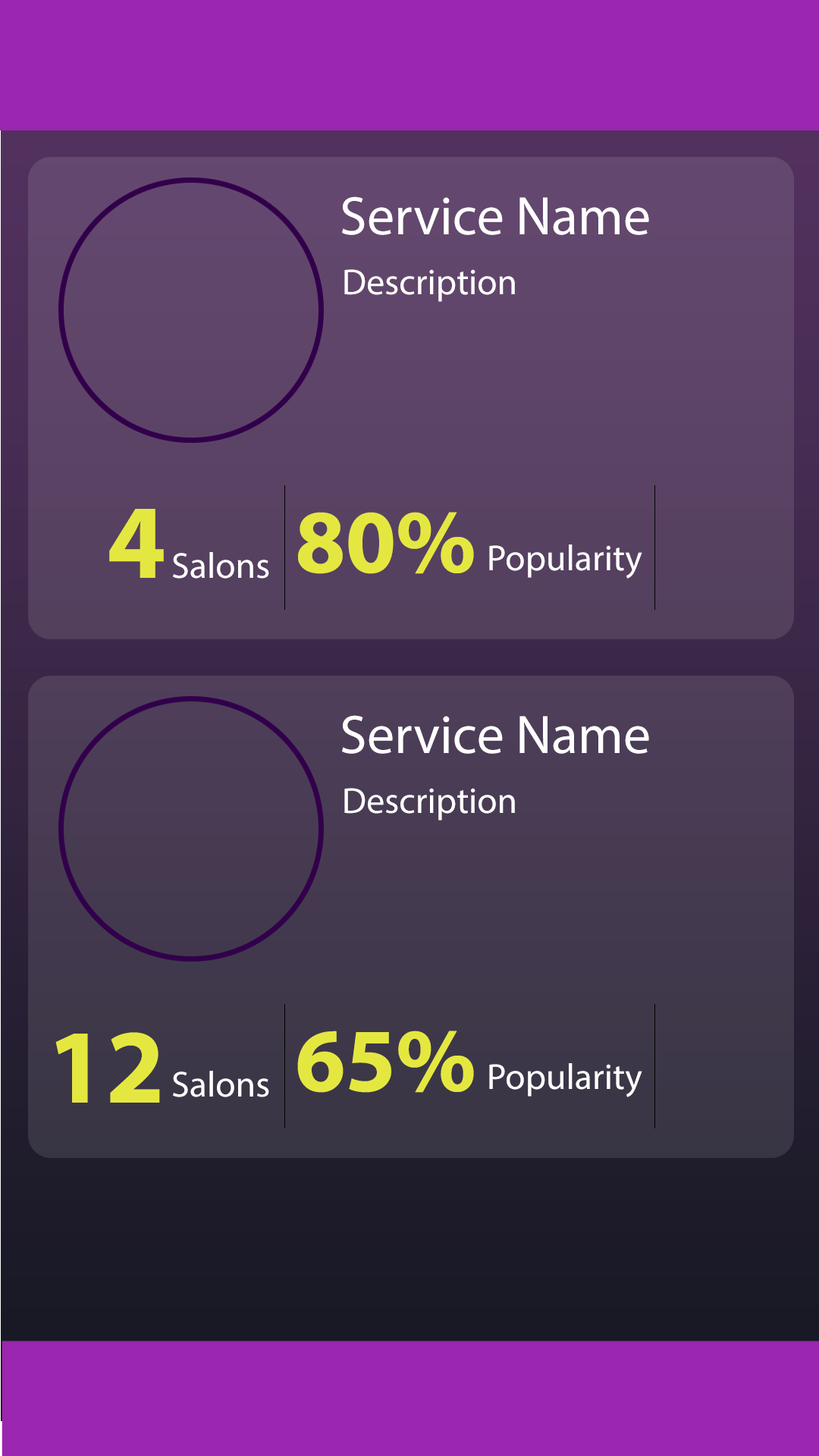
<style>
.page{position:relative;width:819px;height:1456px}
.page>*{position:absolute;margin:0}
.t1{font:54.6px "MyriadPro-Regular";color:#ffffff}
.t2{font:36.4px "MyriadPro-Regular";color:#ffffff}
.t3{font:106.2px "MyriadPro-Bold";color:#e5e741}
.t4{font:91px "MyriadPro-Bold";color:#e5e741}
</style>
<div class="page">
<p class="t1" style="left:342px;top:196px;width:307px;height:39px">Service Name</p>
<p class="t2" style="left:344px;top:269px;width:171px;height:33px">Description</p>
<p class="t3" style="left:109px;top:509px;width:55px;height:69px">4</p>
<p class="t4" style="left:298px;top:512px;width:176px;height:62px">80%</p>
<p class="t2" style="left:489px;top:544px;width:153px;height:35px">Popularity</p>
<p class="t2" style="left:173px;top:552px;width:96px;height:27px">Salons</p>
<p class="t1" style="left:342px;top:715px;width:307px;height:39px">Service Name</p>
<p class="t2" style="left:344px;top:788px;width:171px;height:33px">Description</p>
<p class="t3" style="left:55px;top:1032px;width:105px;height:71px">12</p>
<p class="t4" style="left:297px;top:1031px;width:177px;height:62px">65%</p>
<p class="t2" style="left:173px;top:1071px;width:96px;height:26px">Salons</p>
<p class="t2" style="left:489px;top:1063px;width:153px;height:34px">Popularity</p>
</div>
